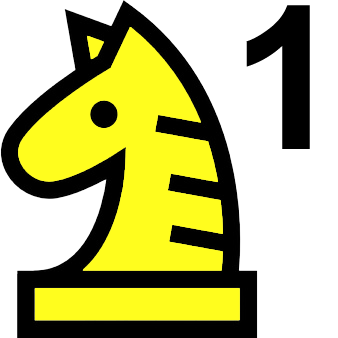
<style>
.page{position:relative;width:338px;height:338px;background:#ffffff}
.page>*{position:absolute;margin:0}
.t1{font:200px "Arial-BoldMT";color:#000000}
</style>
<div class="page">
<p class="t1" style="left:246px;top:5px;width:64px;height:144px">1</p>
</div>
